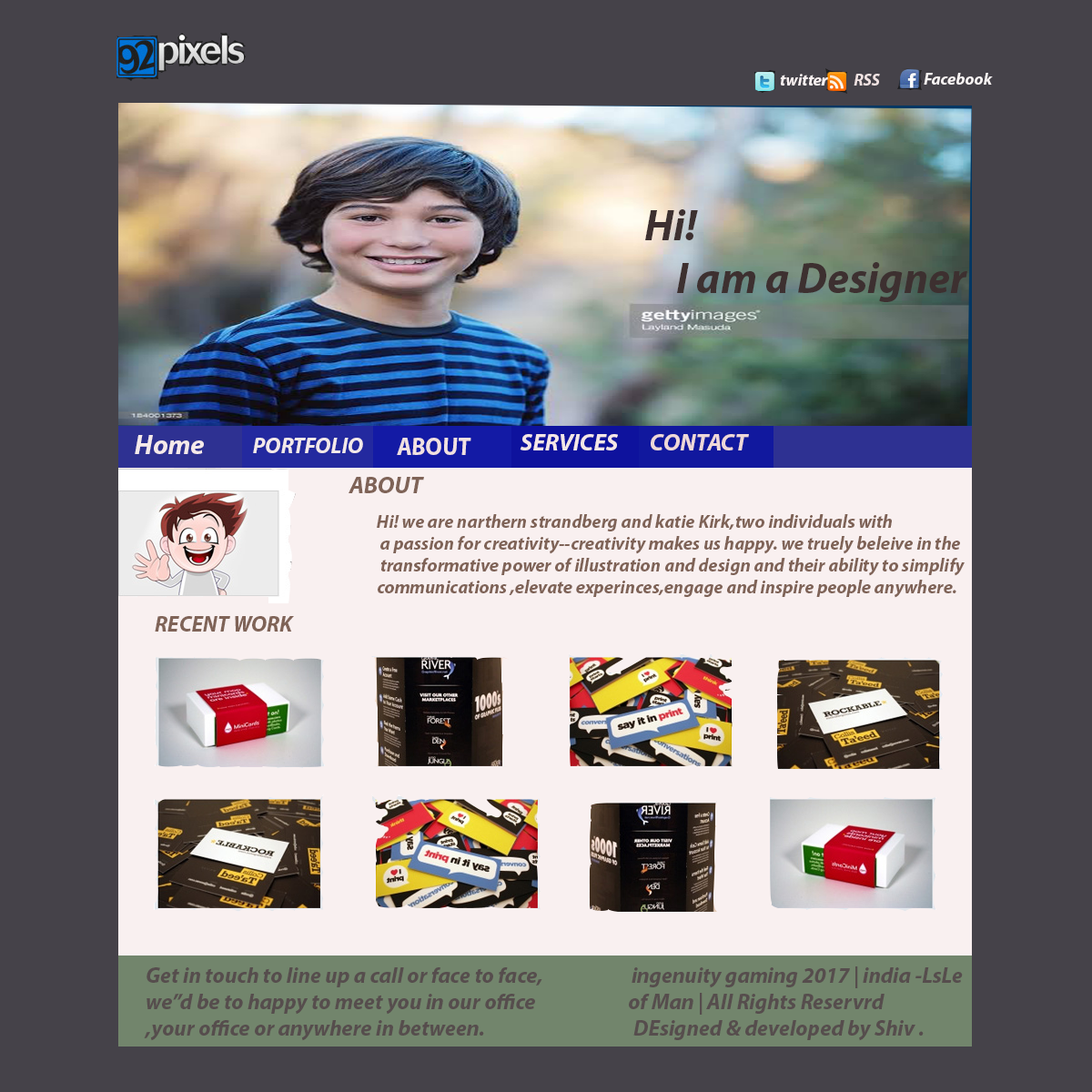
<style>
.page{position:relative;width:1092px;height:1092px;background:#454249}
.page>*{position:absolute;margin:0}
.t1{font:16.4px "MyriadPro-BoldIt";color:#f9f1f1}
.t2{font:16.4px "MyriadPro-BoldIt";color:#f0e2e2}
.t3{font:16.4px "MyriadPro-BoldIt";color:#f9f4f4}
.t4{font:43.7px "MyriadPro-BoldIt";color:#3d3030}
.t5{font:27.3px "MyriadPro-BoldIt";color:#f5eaea}
.t6{font:21.8px "MyriadPro-BoldIt";color:#f3e9e9}
.t7{font:25.5px "MyriadPro-BoldIt";color:#f1e1e1;scale:0.94 1}
.t8{font:23.8px "MyriadPro-BoldIt";color:#f4e7e7}
.t9{font:23.8px "MyriadPro-BoldIt";color:#eed8d8}
.t10{font:23.8px "MyriadPro-BoldIt";color:#7f6357}
.t11{font:18.2px "MyriadPro-BoldIt";color:#7f6357}
.t12{font:21.8px "MyriadPro-BoldIt";color:#7f6357}
.t13{font:21.8px "MyriadPro-BoldIt";color:#564d4d}
</style>
<div class="page">
<p class="t1" style="left:780px;top:74px;width:48px;height:12px">twitter</p>
<p class="t2" style="left:854px;top:74px;width:26px;height:12px">RSS</p>
<p class="t3" style="left:924px;top:73px;width:69px;height:12px">Facebook</p>
<p class="t4" style="left:645px;top:209px;width:322px;height:93px">Hi!<br>    I am a Designer</p>
<p class="t5" style="left:135px;top:435px;width:69px;height:19px">Home</p>
<p class="t6" style="left:253px;top:438px;width:110px;height:15px">PORTFOLIO</p>
<p class="t7" style="left:397px;top:438px;width:74px;height:17px">ABOUT</p>
<p class="t8" style="left:520px;top:434px;width:98px;height:16px">SERVICES</p>
<p class="t9" style="left:651px;top:434px;width:98px;height:16px">CONTACT</p>
<p class="t10" style="left:349px;top:477px;width:75px;height:16px">ABOUT</p>
<p class="t11" style="left:377px;top:514px;width:588px;height:84px">Hi! we are narthern strandberg and katie Kirk,two individuals with<br> a passion for creativity--creativity makes us happy. we truely beleive in the<br> transformative power of illustration and design and their ability to simplify<br>communications ,elevate experinces,engage and inspire people anywhere.</p>
<p class="t12" style="left:155px;top:616px;width:139px;height:16px">RECENT WORK</p>
<p class="t13" style="left:144px;top:966px;width:819px;height:75px">Get in touch to line up a call or face to face,                      ingenuity gaming 2017 | india -LsLe<br>we”d be to happy to meet you in our office                       of Man | All Rights Reservrd<br>,your office or anywhere in between.                                     DEsigned &amp; developed by Shiv .</p>
</div>
